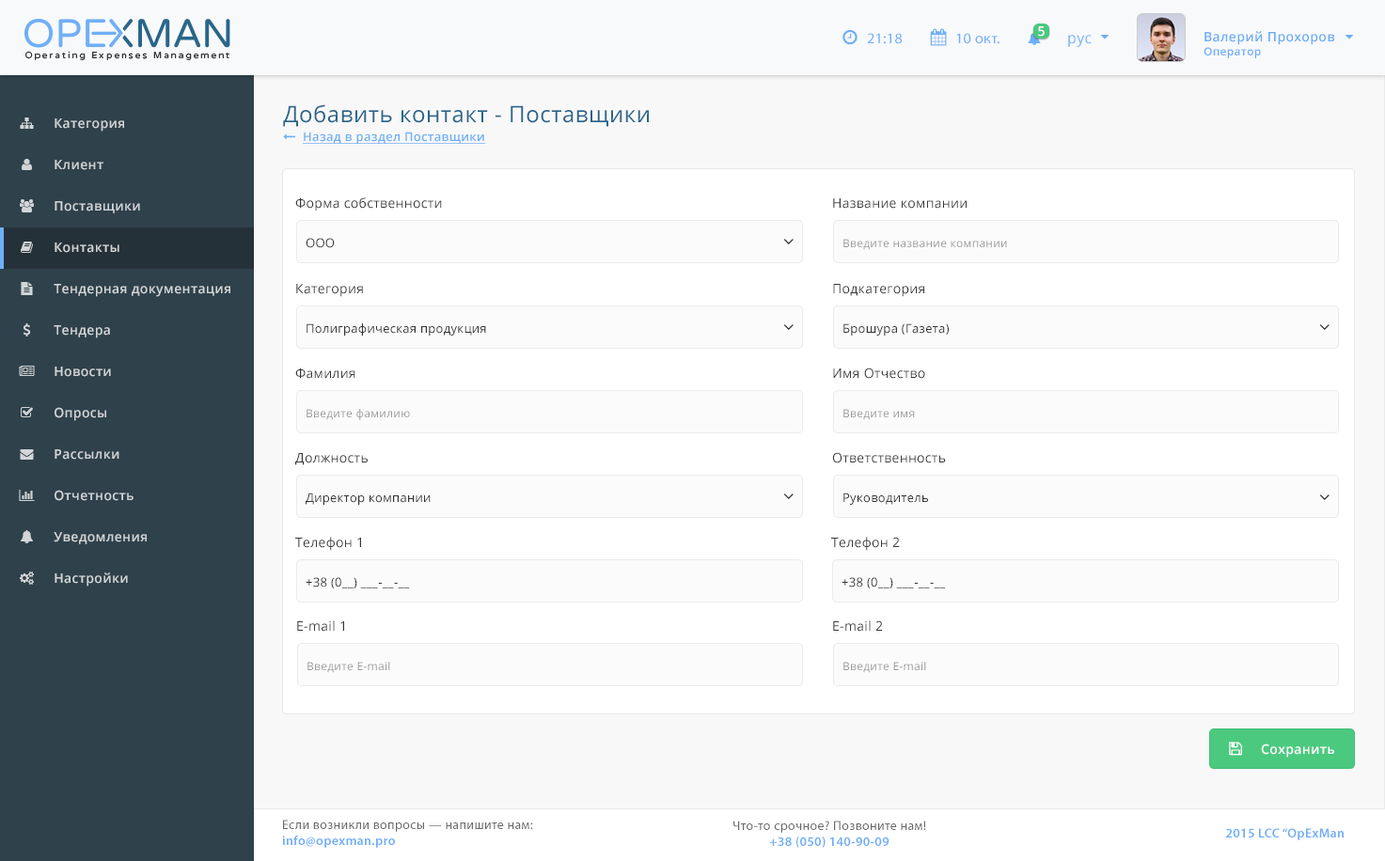
<style>
.page{position:relative;width:1385px;height:861px;background:#ffffff}
.page>*{position:absolute;margin:0}
.t1{font:13.1px "OpenSans-Semibold";letter-spacing:0.025em;color:#ffffff}
.t2{font:15px "MyriadPro-Regular";letter-spacing:0.025em;color:#6faff8}
.t3{font:15px "OpenSans";letter-spacing:0.025em;color:#6eaff8}
.t4{font:13.1px "OpenSans-Semibold";letter-spacing:0.025em;color:#6eaef7}
.t5{font:11.2px "OpenSans-Semibold";letter-spacing:0.025em;color:#6eaef7}
.t6{font:22.5px "OpenSans";letter-spacing:0.025em;color:#29658b}
.t7{font:13.1px "OpenSans-Semibold";letter-spacing:0.025em;color:#d2d5d7}
.t8{font:12.2px "OpenSans-Semibold";letter-spacing:0.025em;color:#6faff8;text-decoration:underline}
.t9{font:13.1px "OpenSans";letter-spacing:0.025em;color:#373838}
.t10{font:12.2px "OpenSans";letter-spacing:0.025em;color:#333333}
.t11{font:11.2px "OpenSans";letter-spacing:0.025em;color:#999999}
.t12{font:13.1px "MyriadPro-Regular";letter-spacing:0.025em;color:#696969}
.t13{font:13.1px "MyriadPro-Semibold";letter-spacing:0.025em;color:#6eaef8}
</style>
<div class="page">
<p class="t1" style="left:1038px;top:26px;width:6px;height:11px">5</p>
<p class="t2" style="left:867px;top:33px;width:35px;height:11px">21:18</p>
<p class="t2" style="left:956px;top:33px;width:43px;height:11px">10 окт.</p>
<p class="t3" style="left:1068px;top:35px;width:23px;height:12px">рус</p>
<p class="t4" style="left:1203px;top:31px;width:132px;height:27px">Валерий Прохоров<br><span class="t5">Оператор</span></p>
<p class="t6" style="left:283px;top:104px;width:366px;height:23px">Добавить контакт - Поставщики</p>
<p class="t7" style="left:55px;top:118px;width:69px;height:14px">Категория</p>
<p class="t8" style="left:303px;top:132px;width:183px;height:12px">Назад в раздел Поставщики</p>
<p class="t7" style="left:55px;top:160px;width:48px;height:10px">Клиент</p>
<p class="t9" style="left:295px;top:197px;width:147px;height:15px">Форма собственности</p>
<p class="t7" style="left:55px;top:201px;width:85px;height:12px">Поставщики</p>
<p class="t9" style="left:833px;top:198px;width:133px;height:11px">Название компании</p>
<p class="t7" style="left:55px;top:243px;width:64px;height:10px">Контакты</p>
<p class="t10" style="left:306px;top:238px;width:29px;height:10px">ООО</p>
<p class="t11" style="left:843px;top:239px;width:164px;height:11px">Введите название компании</p>
<p class="t7" style="left:54px;top:284px;width:176px;height:13px">Тендерная документация</p>
<p class="t9" style="left:296px;top:284px;width:67px;height:13px">Категория</p>
<p class="t9" style="left:833px;top:284px;width:91px;height:13px">Подкатегория</p>
<p class="t7" style="left:54px;top:325px;width:56px;height:13px">Тендера</p>
<p class="t10" style="left:306px;top:323px;width:180px;height:13px">Полиграфическая продукция</p>
<p class="t10" style="left:843px;top:323px;width:106px;height:13px">Брошура (Газета)</p>
<p class="t7" style="left:55px;top:367px;width:56px;height:10px">Новости</p>
<p class="t9" style="left:295px;top:368px;width:60px;height:11px">Фамилия</p>
<p class="t9" style="left:833px;top:368px;width:92px;height:11px">Имя Отчество</p>
<p class="t7" style="left:55px;top:407px;width:51px;height:14px">Опросы</p>
<p class="t11" style="left:306px;top:409px;width:104px;height:11px">Введите фамилию</p>
<p class="t11" style="left:843px;top:409px;width:72px;height:11px">Введите имя</p>
<p class="t7" style="left:55px;top:449px;width:64px;height:11px">Рассылки</p>
<p class="t9" style="left:295px;top:453px;width:73px;height:12px">Должность</p>
<p class="t9" style="left:832px;top:452px;width:114px;height:11px">Ответственность</p>
<p class="t7" style="left:55px;top:490px;width:78px;height:11px">Отчетность</p>
<p class="t10" style="left:306px;top:493px;width:125px;height:12px">Директор компании</p>
<p class="t10" style="left:843px;top:493px;width:85px;height:12px">Руководитель</p>
<p class="t7" style="left:54px;top:532px;width:93px;height:12px">Уведомления</p>
<p class="t9" style="left:295px;top:537px;width:66px;height:14px">Телефон 1</p>
<p class="t9" style="left:831px;top:537px;width:69px;height:14px">Телефон 2</p>
<p class="t7" style="left:55px;top:573px;width:73px;height:14px">Настройки</p>
<p class="t10" style="left:306px;top:577px;width:104px;height:11px">+38 (0__) ___-__-__</p>
<p class="t10" style="left:841px;top:577px;width:105px;height:11px">+38 (0__) ___-__-__</p>
<p class="t9" style="left:297px;top:620px;width:47px;height:12px">E-mail 1</p>
<p class="t9" style="left:833px;top:620px;width:50px;height:12px">E-mail 2</p>
<p class="t11" style="left:307px;top:662px;width:83px;height:11px">Введите E-mail</p>
<p class="t11" style="left:843px;top:662px;width:83px;height:11px">Введите E-mail</p>
<p class="t1" style="left:1261px;top:744px;width:73px;height:14px">Сохранить</p>
<p class="t12" style="left:282px;top:820px;width:251px;height:28px">Если возникли вопросы — напишите нам:<br><span class="t13">info@opexman.pro</span></p>
<p class="t12" style="left:733px;top:821px;width:193px;height:27px;text-align:center">Что-то срочное? Позвоните нам!<br><span class="t13">+38 (050) 140-90-09</span></p>
<p class="t13" style="left:1226px;top:828px;width:117px;height:12px">2015 LCC “OpExMan</p>
</div>
